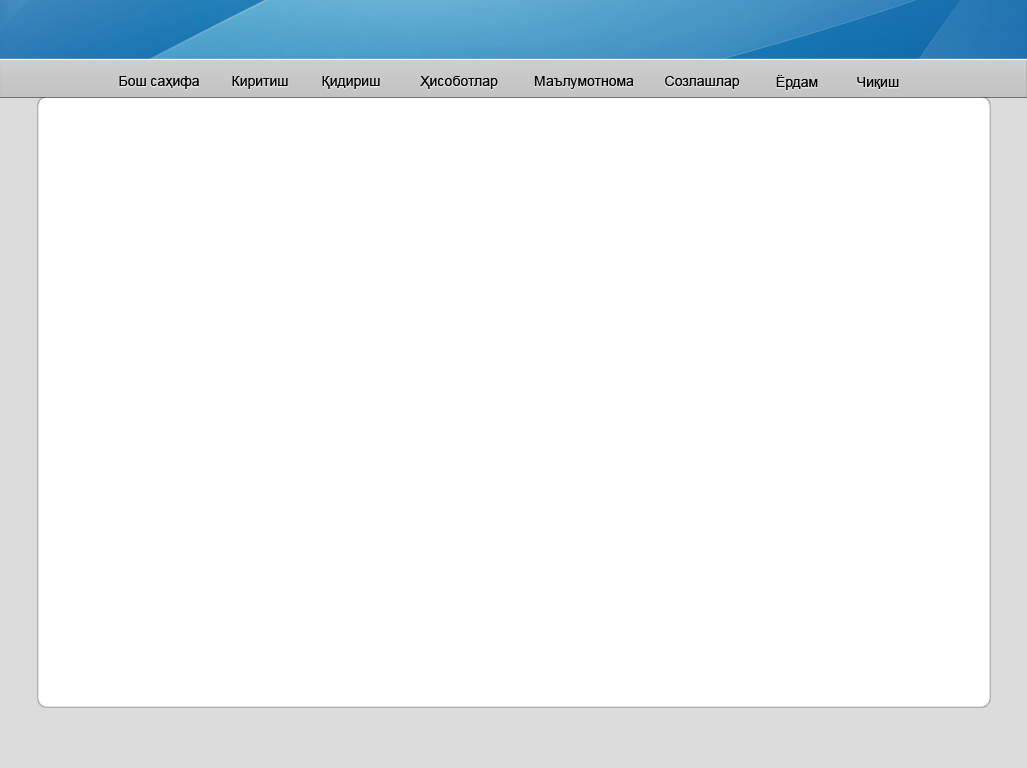
<style>
.page{position:relative;width:1027px;height:768px;background:#ffffff}
.page>*{position:absolute;margin:0}
.t1{font:14px "ArialMT";color:#000000}
</style>
<div class="page">
<p class="t1" style="left:119px;top:76px;width:80px;height:13px">Бош саҳифа</p>
<p class="t1" style="left:232px;top:76px;width:56px;height:13px">Киритиш</p>
<p class="t1" style="left:322px;top:76px;width:58px;height:13px">Қидириш</p>
<p class="t1" style="left:420px;top:76px;width:78px;height:13px">Ҳисоботлар</p>
<p class="t1" style="left:534px;top:76px;width:100px;height:13px">Маълумотнома</p>
<p class="t1" style="left:665px;top:76px;width:75px;height:13px">Созлашлар</p>
<p class="t1" style="left:776px;top:75px;width:42px;height:15px">Ёрдам</p>
<p class="t1" style="left:857px;top:77px;width:42px;height:12px">Чиқиш</p>
</div>
